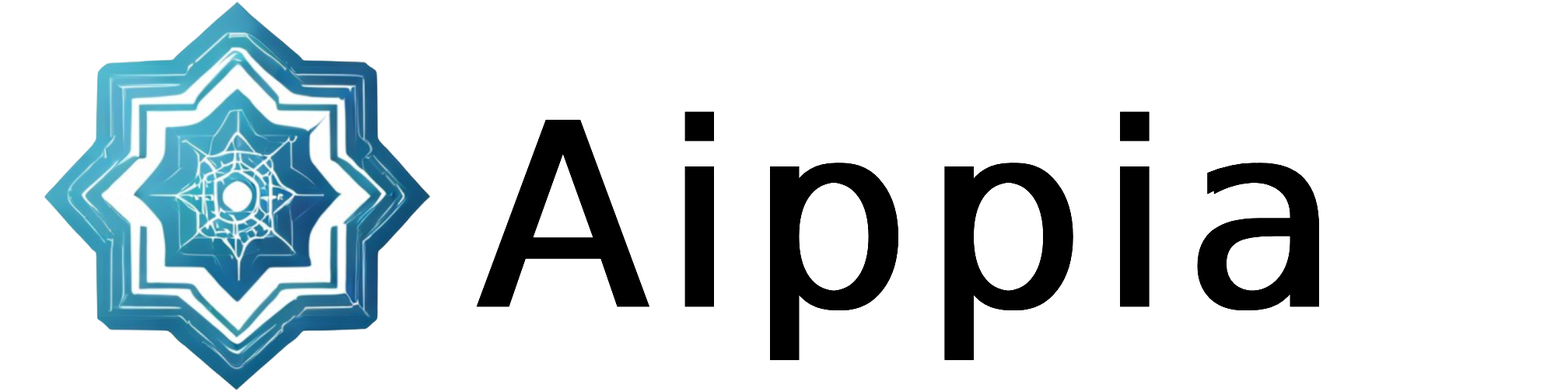
<style>
.page{position:relative;width:1568px;height:392px;background:#ffffff}
.page>*{position:absolute;margin:0}
.t1{font:256.4px "AdobeHeitiStd-Regular";letter-spacing:0.04em;color:#000000;font-weight:bold}
</style>
<div class="page">
<p class="t1" style="left:476px;top:111px;width:843px;height:249px">Aippia</p>
</div>
